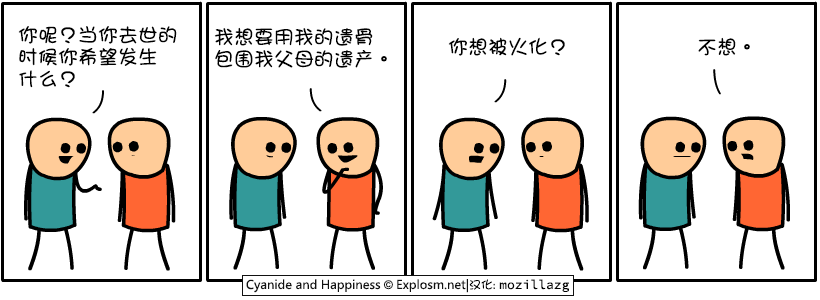
<style>
.page{position:relative;width:820px;height:300px;background:#ffffff}
.page>*{position:absolute;margin:0}
.t1{font:20px/22px "DFGirl";color:#000000}
.t2{font:20px "DFGirl";color:#000000}
</style>
<div class="page">
<p class="t1" style="left:18px;top:26px;width:159px;height:62px">你呢？当你去世的<br>时候你希望发生<br>什么？</p>
<p class="t1" style="left:214px;top:27px;width:173px;height:41px">我想要用我的遗骨<br>包围我父母的遗产。</p>
<p class="t2" style="left:448px;top:37px;width:117px;height:19px">你想被火化？</p>
<p class="t2" style="left:698px;top:37px;width:52px;height:19px">不想。</p>
</div>
